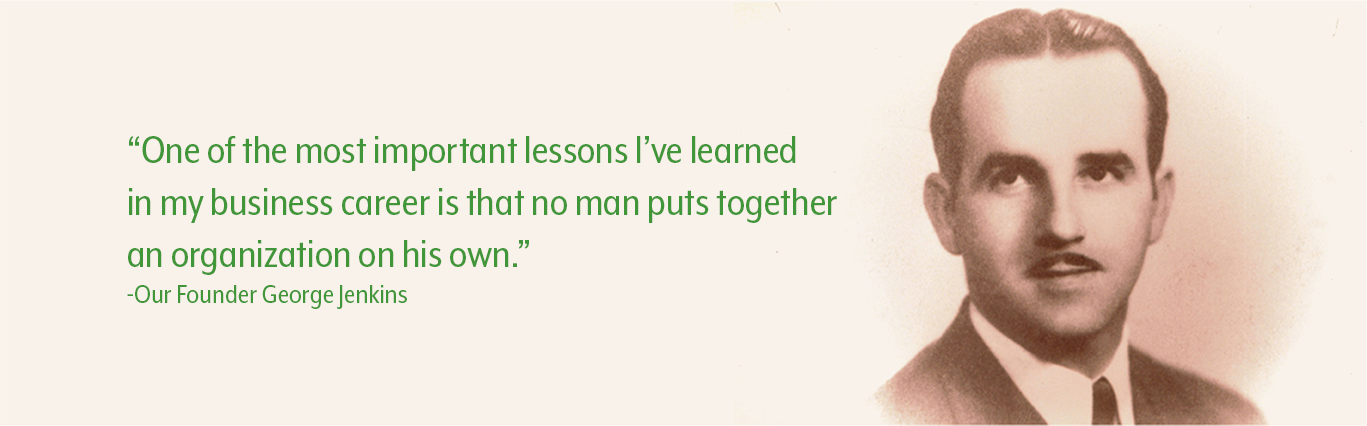
<style>
.page{position:relative;width:1367px;height:426px;background:#f9f2ea}
.page>*{position:absolute;margin:0}
.t1{font:43.4px "MrEavesXLModNarOT-Reg";color:#419639;scale:1.04 1}
.t2{font:30px "MrEavesXLModNarOT-Reg";color:#419639;scale:1.04 1}
</style>
<div class="page">
<p class="t1" style="left:127px;top:136px;width:710px;height:173px">“One of the most important lessons I’ve learned <br>in my business career is that no man puts together<br>an Organization on his own.” <br><span class="t2">-Our Founder George Jenkins</span></p>
</div>
